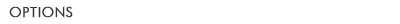
<style>
.page{position:relative;width:400px;height:24px;background:#ffffff}
.page>*{position:absolute;margin:0}
.t1{font:14px "FuturaBT-Light";letter-spacing:0.025em;color:#363636;text-transform:uppercase;font-weight:bold}
</style>
<div class="page">
<p class="t1" style="left:9px;top:6px;width:64px;height:12px">options</p>
</div>
